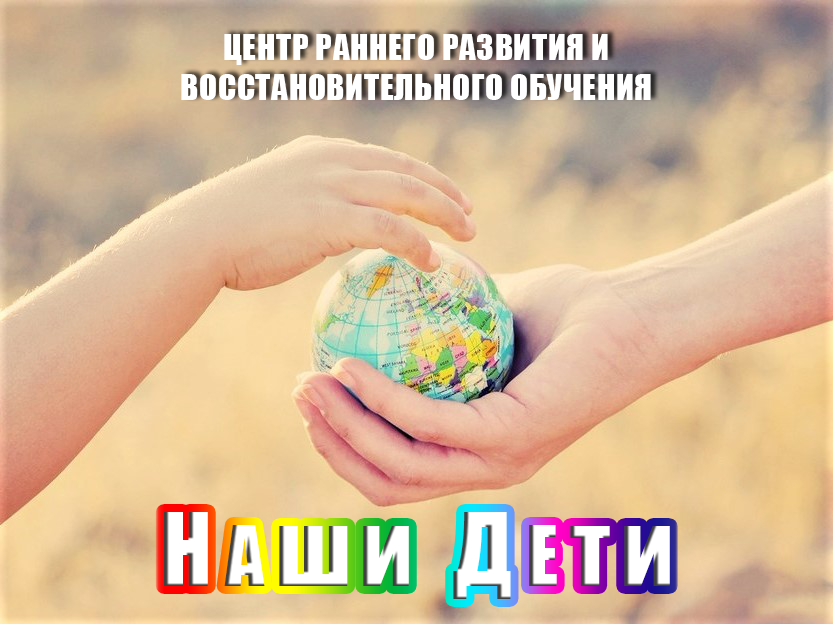
<style>
.page{position:relative;width:833px;height:624px}
.page>*{position:absolute;margin:0}
.t1{font:33px "Impact";letter-spacing:0.02em;color:#ffffff}
.t2{font:93px "Impact";letter-spacing:0.105em;color:#ffffff}
.t3{font:93px "Impact";letter-spacing:0.145em;color:#ffffff}
.t4{font:77px "Impact";letter-spacing:0.145em;color:#ffffff}
.t5{font:77px "Impact";letter-spacing:0.165em;color:#ffffff}
.t6{font:93px "Impact";letter-spacing:0.11em;color:#ffffff}
</style>
<div class="page">
<p class="t1" style="left:181px;top:34px;width:470px;height:66px;text-align:center">ЦЕНТР РАННЕГО РАЗВИТИЯ И ВОССТАНОВИТЕЛЬНОГО ОБУЧЕНИЯ</p>
<p class="t2" style="left:163px;top:512px;width:507px;height:87px"><span class="t3">Н</span><span class="t4">А</span>ши<span class="t3"> Д</span><span class="t5">Е</span><span class="t6">ти</span></p>
</div>
